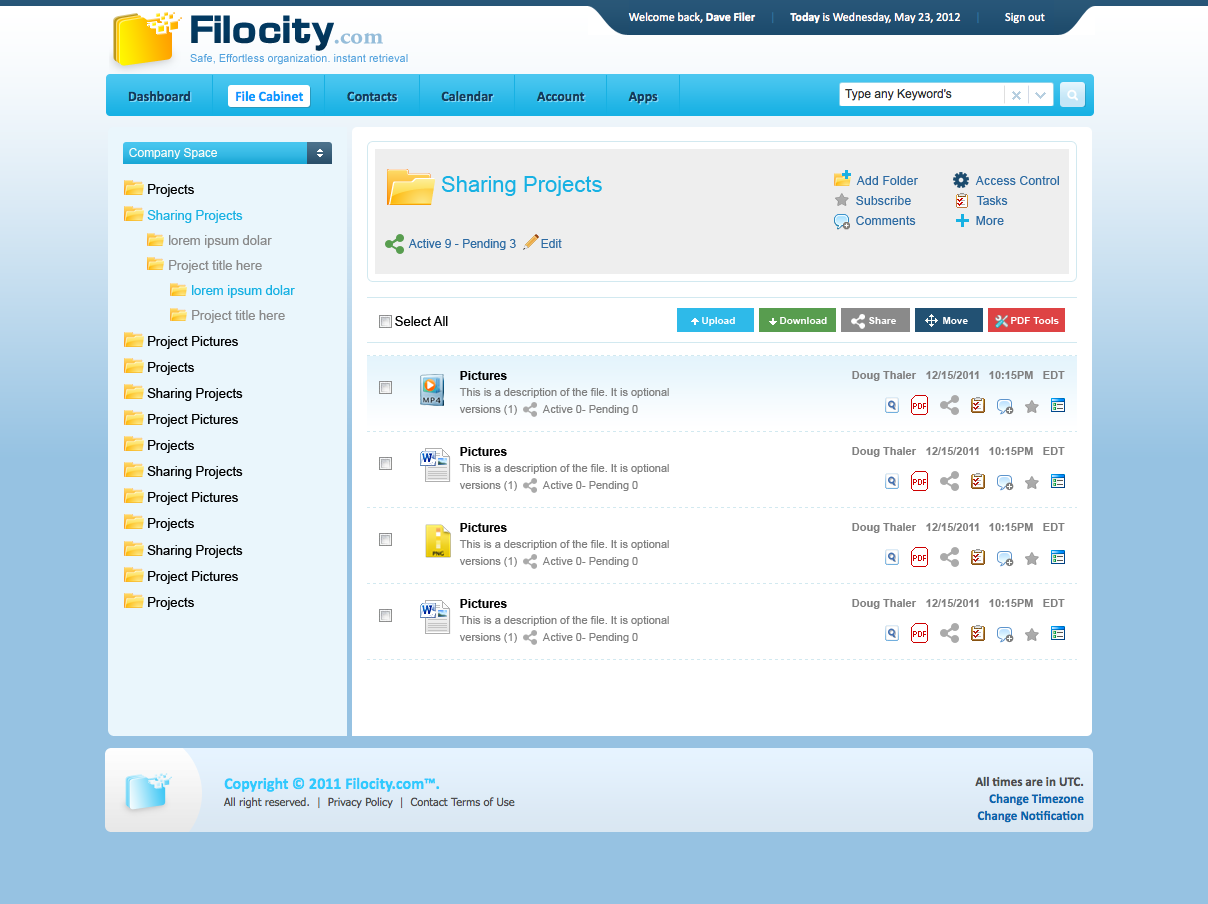
<style>
.page{position:relative;width:1208px;height:904px;background:#ffffff}
.page>*{position:absolute;margin:0}
.t1{font:12px "ArialMT";color:#fafcf7}
.t2{font:13px "ArialMT";color:#000000}
.t3{font:22px "ArialMT";color:#17b1e3}
.t4{font:12px "ArialMT";letter-spacing:0.02em;color:#2d6ba3}
.t5{font:12px "ArialMT";color:#2d6ba3}
.t6{font:13px "ArialMT";color:#18b1e3}
.t7{font:13px "ArialMT";color:#8a8a8a}
.t8{font:10px "Arial-BoldMT";color:#ffffff}
.t9{font:12px "Arial-BoldMT";color:#000000}
.t10{font:11px "Arial-BoldMT";color:#808080}
.t11{font:11px "ArialMT";color:#808080}
</style>
<div class="page">
<p class="t1" style="left:129px;top:148px;width:88px;height:11px">Company Space</p>
<p class="t2" style="left:148px;top:184px;width:46px;height:13px">Projects</p>
<p class="t3" style="left:441px;top:176px;width:161px;height:20px">Sharing Projects</p>
<p class="t4" style="left:856px;top:176px;width:62px;height:9px">Add Folder</p>
<p class="t4" style="left:975px;top:176px;width:84px;height:9px">Access Control</p>
<p class="t4" style="left:856px;top:196px;width:55px;height:9px">Subscribe</p>
<p class="t5" style="left:976px;top:196px;width:32px;height:9px">Tasks</p>
<p class="t6" style="left:147px;top:210px;width:96px;height:13px">Sharing Projects</p>
<p class="t4" style="left:856px;top:216px;width:60px;height:9px">Comments</p>
<p class="t4" style="left:976px;top:216px;width:28px;height:9px">More</p>
<p class="t7" style="left:169px;top:235px;width:103px;height:13px">lorem ipsum dolar</p>
<p class="t5" style="left:408px;top:239px;width:108px;height:11px">Active 9 - Pending 3</p>
<p class="t5" style="left:541px;top:239px;width:21px;height:9px">Edit</p>
<p class="t7" style="left:169px;top:260px;width:93px;height:13px">Project title here</p>
<p class="t6" style="left:192px;top:285px;width:103px;height:13px">lorem ipsum dolar</p>
<p class="t7" style="left:192px;top:310px;width:93px;height:13px">Project title here</p>
<p class="t2" style="left:395px;top:316px;width:53px;height:10px">Select All</p>
<p class="t8" style="left:702px;top:317px;width:33px;height:9px">Upload</p>
<p class="t8" style="left:780px;top:317px;width:47px;height:7px">Download</p>
<p class="t8" style="left:869px;top:317px;width:27px;height:7px">Share</p>
<p class="t8" style="left:943px;top:317px;width:25px;height:7px">Move</p>
<p class="t8" style="left:1011px;top:317px;width:48px;height:7px">PDF Tools</p>
<p class="t2" style="left:148px;top:336px;width:90px;height:13px">Project Pictures</p>
<p class="t2" style="left:148px;top:362px;width:46px;height:13px">Projects</p>
<p class="t9" style="left:460px;top:371px;width:47px;height:9px">Pictures</p>
<p class="t10" style="left:852px;top:371px;width:65px;height:10px">Doug Thaler</p>
<p class="t10" style="left:926px;top:371px;width:53px;height:8px">12/15/2011</p>
<p class="t10" style="left:989px;top:371px;width:44px;height:8px">10:15PM</p>
<p class="t10" style="left:1043px;top:371px;width:22px;height:8px">EDT</p>
<p class="t2" style="left:147px;top:388px;width:96px;height:13px">Sharing Projects</p>
<p class="t11" style="left:459px;top:388px;width:210px;height:10px">This is a description of the file. It is optional</p>
<p class="t2" style="left:148px;top:414px;width:90px;height:13px">Project Pictures</p>
<p class="t11" style="left:459px;top:405px;width:58px;height:10px">versions (1)</p>
<p class="t11" style="left:542px;top:405px;width:96px;height:10px">Active 0- Pending 0</p>
<p class="t2" style="left:148px;top:440px;width:46px;height:13px">Projects</p>
<p class="t9" style="left:460px;top:447px;width:47px;height:9px">Pictures</p>
<p class="t10" style="left:852px;top:447px;width:65px;height:10px">Doug Thaler</p>
<p class="t10" style="left:926px;top:447px;width:53px;height:8px">12/15/2011</p>
<p class="t10" style="left:989px;top:447px;width:44px;height:8px">10:15PM</p>
<p class="t10" style="left:1043px;top:447px;width:22px;height:8px">EDT</p>
<p class="t2" style="left:147px;top:466px;width:96px;height:13px">Sharing Projects</p>
<p class="t11" style="left:459px;top:464px;width:210px;height:10px">This is a description of the file. It is optional</p>
<p class="t11" style="left:459px;top:481px;width:58px;height:10px">versions (1)</p>
<p class="t11" style="left:542px;top:481px;width:96px;height:10px">Active 0- Pending 0</p>
<p class="t2" style="left:148px;top:492px;width:90px;height:13px">Project Pictures</p>
<p class="t2" style="left:148px;top:518px;width:46px;height:13px">Projects</p>
<p class="t9" style="left:460px;top:523px;width:47px;height:9px">Pictures</p>
<p class="t10" style="left:852px;top:523px;width:65px;height:10px">Doug Thaler</p>
<p class="t10" style="left:926px;top:523px;width:53px;height:8px">12/15/2011</p>
<p class="t10" style="left:989px;top:523px;width:44px;height:8px">10:15PM</p>
<p class="t10" style="left:1043px;top:523px;width:22px;height:8px">EDT</p>
<p class="t2" style="left:147px;top:545px;width:96px;height:13px">Sharing Projects</p>
<p class="t11" style="left:459px;top:540px;width:210px;height:10px">This is a description of the file. It is optional</p>
<p class="t11" style="left:459px;top:557px;width:58px;height:10px">versions (1)</p>
<p class="t11" style="left:542px;top:557px;width:96px;height:10px">Active 0- Pending 0</p>
<p class="t2" style="left:148px;top:571px;width:90px;height:13px">Project Pictures</p>
<p class="t2" style="left:148px;top:597px;width:46px;height:13px">Projects</p>
<p class="t9" style="left:460px;top:599px;width:47px;height:9px">Pictures</p>
<p class="t10" style="left:852px;top:599px;width:65px;height:10px">Doug Thaler</p>
<p class="t10" style="left:926px;top:599px;width:53px;height:8px">12/15/2011</p>
<p class="t10" style="left:989px;top:599px;width:44px;height:8px">10:15PM</p>
<p class="t10" style="left:1043px;top:599px;width:22px;height:8px">EDT</p>
<p class="t11" style="left:459px;top:616px;width:210px;height:10px">This is a description of the file. It is optional</p>
<p class="t11" style="left:459px;top:633px;width:58px;height:10px">versions (1)</p>
<p class="t11" style="left:542px;top:633px;width:96px;height:10px">Active 0- Pending 0</p>
</div>
